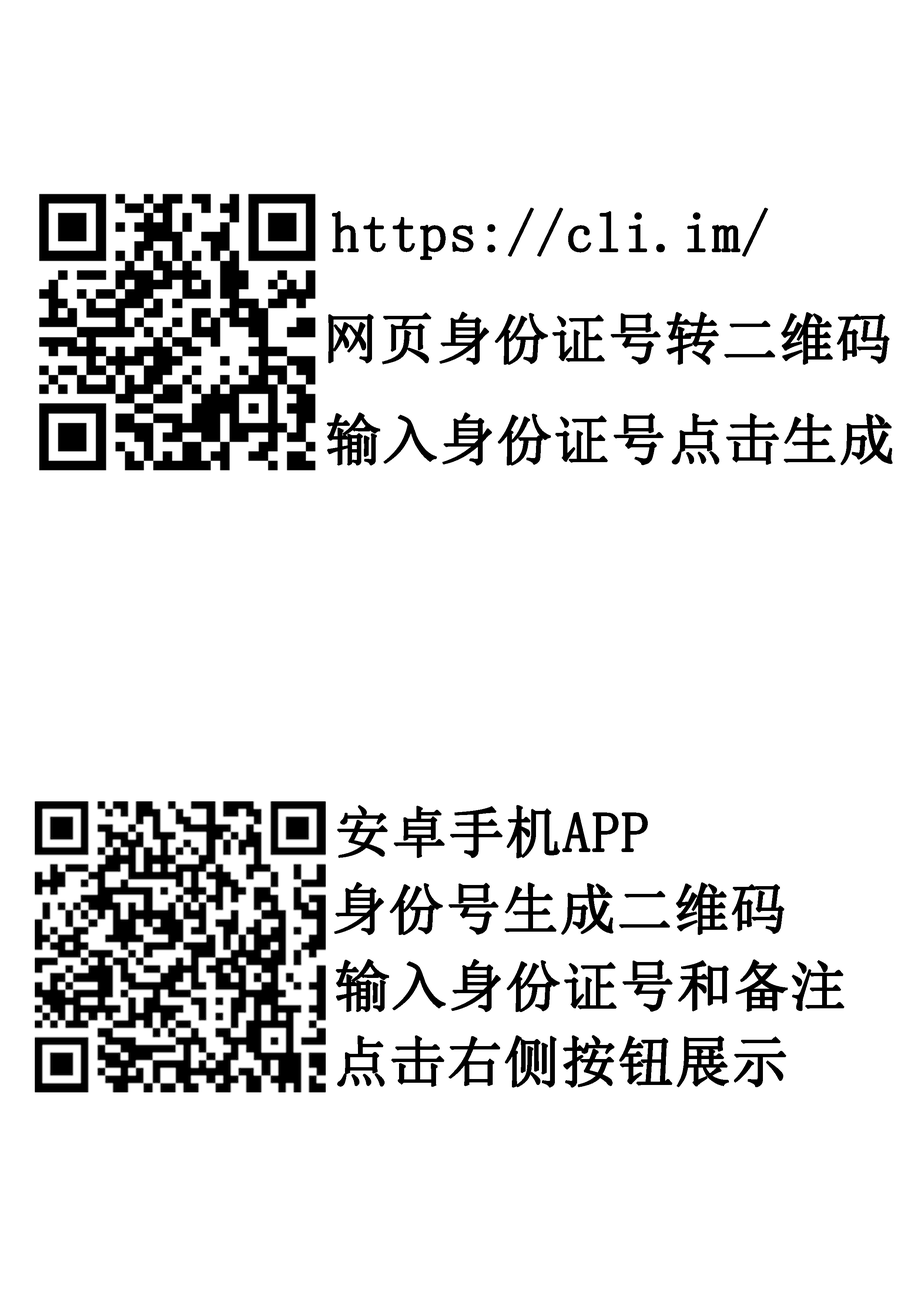
<style>
.page{position:relative;width:918px;height:1299px;background:#ffffff}
.page>*{position:absolute;margin:0}
.t1{font:55.5px "SimSun";color:#000000;font-weight:bold}
</style>
<div class="page">
<p class="t1" style="left:332px;top:208px;width:436px;height:52px">https://cli.im/</p>
<p class="t1" style="left:328px;top:312px;width:562px;height:53px">网页身份证号转二维码</p>
<p class="t1" style="left:327px;top:412px;width:566px;height:53px">输入身份证号点击生成</p>
<p class="t1" style="left:337px;top:805px;width:311px;height:53px">安卓手机APP</p>
<p class="t1" style="left:334px;top:882px;width:450px;height:53px">身份号生成二维码</p>
<p class="t1" style="left:336px;top:959px;width:508px;height:53px">输入身份证号和备注</p>
<p class="t1" style="left:337px;top:1035px;width:449px;height:52px">点击右侧按钮展示</p>
</div>
